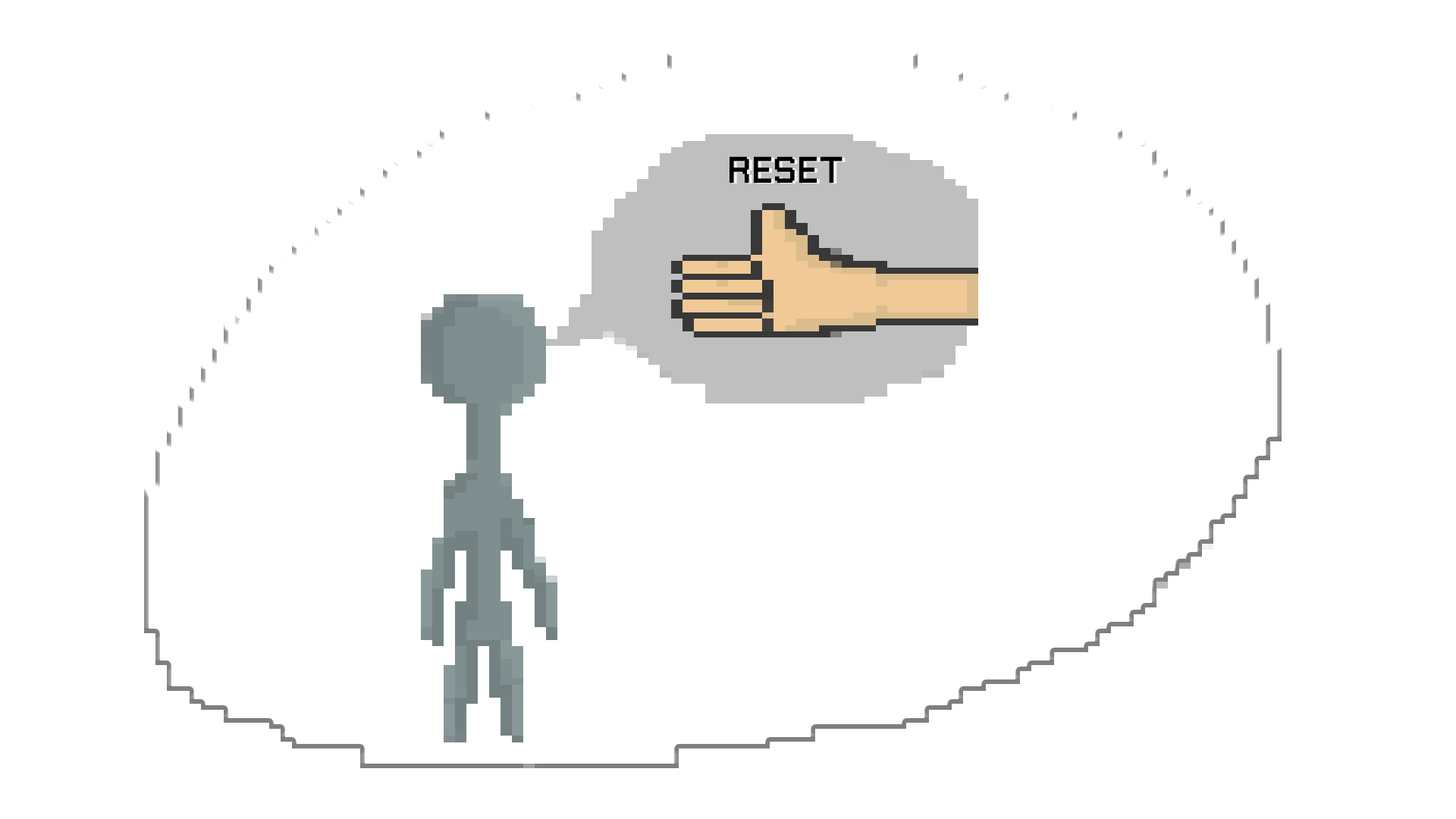
<style>
.page{position:relative;width:1456px;height:819px;background:#ffffff}
.page>*{position:absolute;margin:0}
.t1{font:34.8px "PixelGameFont";color:#000000;text-transform:uppercase}
</style>
<div class="page">
<p class="t1" style="left:730px;top:156px;width:112px;height:27px">reset</p>
</div>
